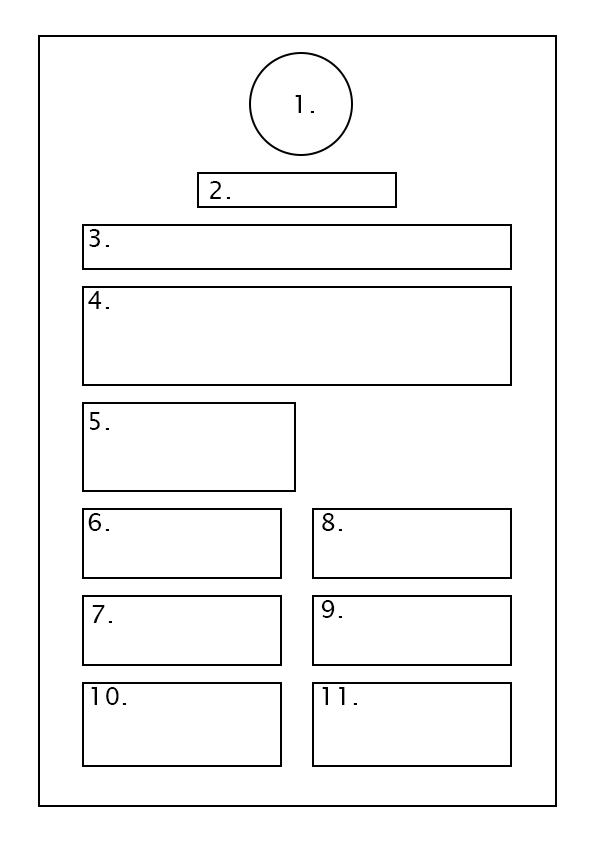
<style>
.page{position:relative;width:595px;height:842px;background:#ffffff}
.page>*{position:absolute;margin:0}
.t1{font:25px "LucidaSans";letter-spacing:0.02em;color:#000000}
</style>
<div class="page">
<p class="t1" style="left:295px;top:95px;width:19px;height:18px">1.</p>
<p class="t1" style="left:210px;top:181px;width:20px;height:18px">2.</p>
<p class="t1" style="left:89px;top:229px;width:20px;height:18px">3.</p>
<p class="t1" style="left:88px;top:291px;width:21px;height:18px">4.</p>
<p class="t1" style="left:90px;top:412px;width:19px;height:18px">5.</p>
<p class="t1" style="left:88px;top:513px;width:21px;height:18px">6.</p>
<p class="t1" style="left:322px;top:513px;width:20px;height:18px">8.</p>
<p class="t1" style="left:92px;top:605px;width:20px;height:18px">7.</p>
<p class="t1" style="left:321px;top:600px;width:21px;height:18px">9.</p>
<p class="t1" style="left:91px;top:687px;width:35px;height:18px">10.</p>
<p class="t1" style="left:322px;top:687px;width:35px;height:18px">11.</p>
</div>
